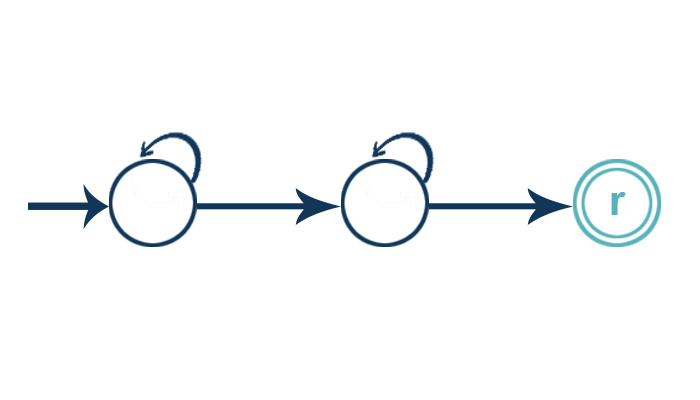
<style>
.page{position:relative;width:700px;height:400px;background:#ffffff}
.page>*{position:absolute;margin:0}
.t1{font:41.7px "Arial-BoldMT";color:#58b2ba}
</style>
<div class="page">
<p class="t1" style="left:611px;top:192px;width:15px;height:23px">r</p>
</div>
